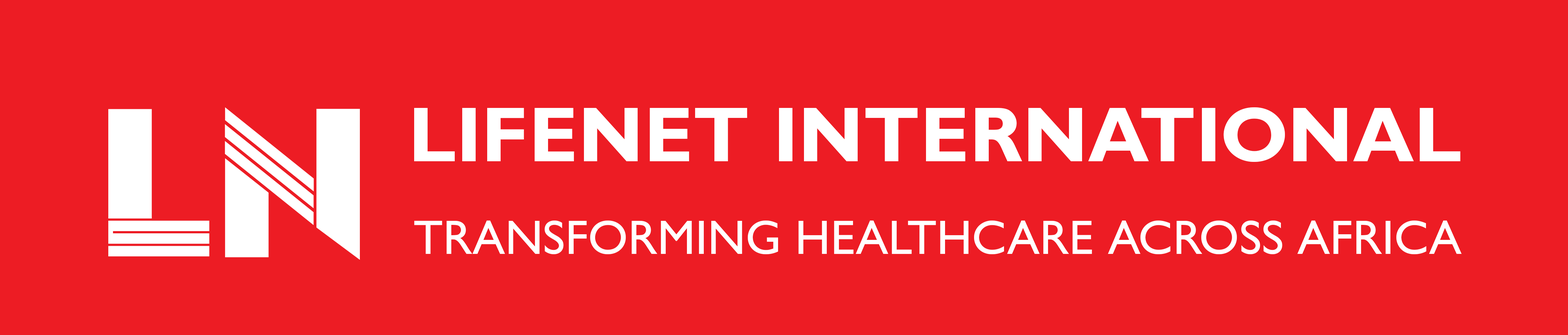
<style>
.page{position:relative;width:1568px;height:335px;background:#ed1c24}
.page>*{position:absolute;margin:0}
.t1{font:78px "GillSansMTStd-Bold";color:#ffffff}
.t2{font:48.6px "GillSansMTStd-Medium";color:#ffffff;text-transform:uppercase}
</style>
<div class="page">
<p class="t1" style="left:414px;top:107px;width:1046px;height:55px">LIFENET INTERNATIONAL</p>
<p class="t2" style="left:414px;top:221px;width:1048px;height:34px">Transforming healthcare across Africa</p>
</div>
